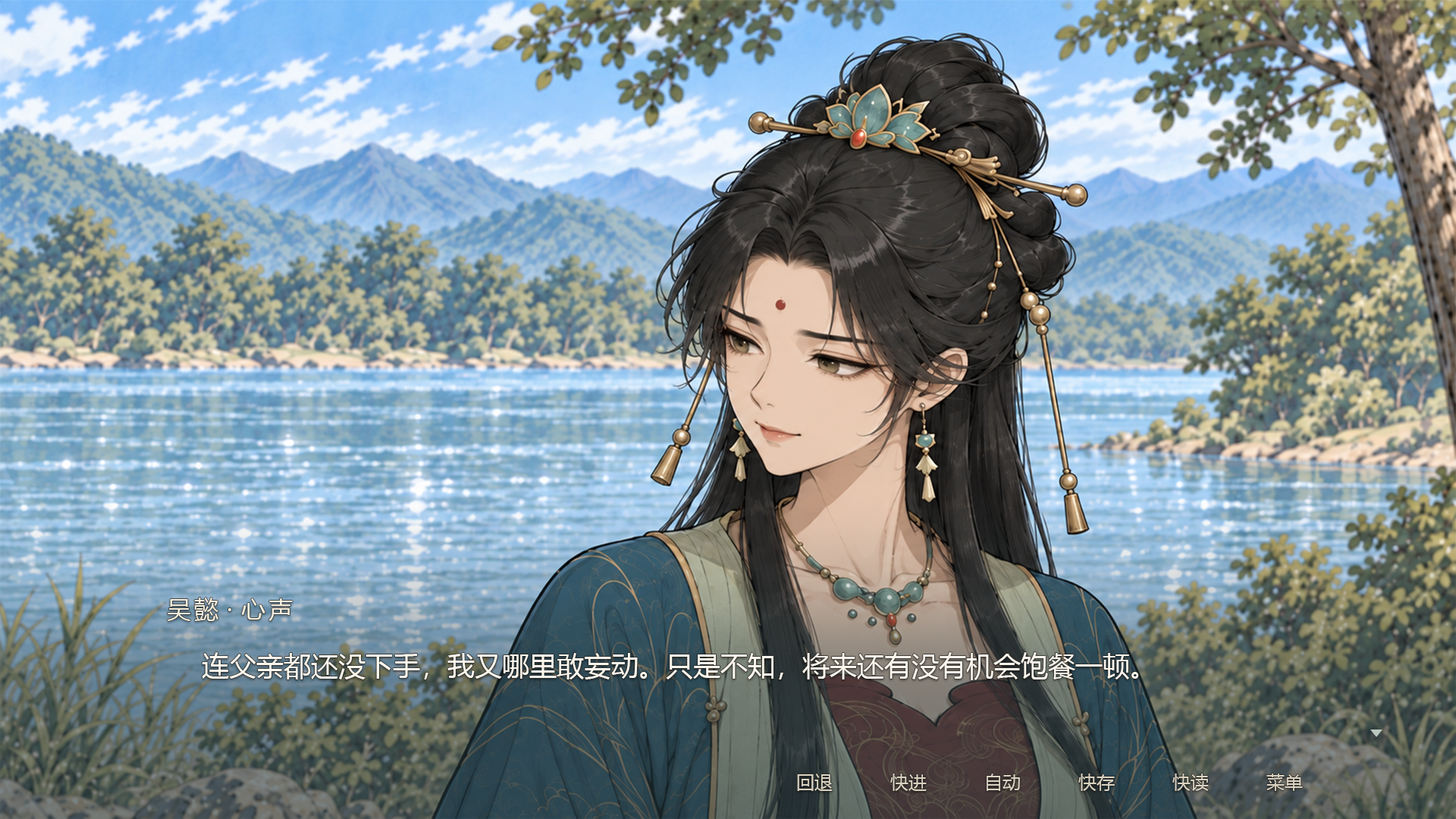
<style>
.page{position:relative;width:1456px;height:819px}
.page>*{position:absolute;margin:0}
.t1{font:24.3px "MicrosoftYaHeiUI";letter-spacing:0.11em;color:#f6efde}
.t2{font:27.3px "MicrosoftYaHeiUI";color:#fcf7ed}
.t3{font:18.2px "MicrosoftYaHeiUI";color:#dad3c2}
</style>
<div class="page">
<p class="t1" style="left:167px;top:598px;width:126px;height:23px">吴懿·心声</p>
<p class="t2" style="left:202px;top:652px;width:937px;height:28px">连父亲都还没下手，我又哪里敢妄动。只是不知，将来还有没有机会饱餐一顿。</p>
<p class="t3" style="left:797px;top:773px;width:36px;height:18px">回退</p>
<p class="t3" style="left:890px;top:773px;width:37px;height:18px">快进</p>
<p class="t3" style="left:987px;top:773px;width:33px;height:18px">自动</p>
<p class="t3" style="left:1078px;top:773px;width:37px;height:18px">快存</p>
<p class="t3" style="left:1172px;top:773px;width:37px;height:18px">快读</p>
<p class="t3" style="left:1266px;top:773px;width:37px;height:18px">菜单</p>
</div>
